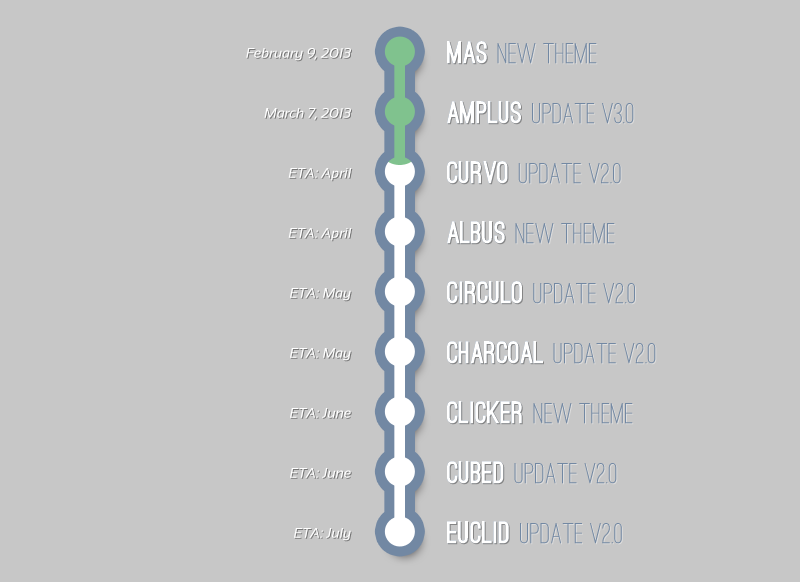
<style>
.page{position:relative;width:800px;height:582px;background:#c7c7c7}
.page>*{position:absolute;margin:0}
.t1{font:30px/60px "OstrichSans-Medium";color:#ffffff}
.t2{font:30px/60px "OstrichSans-Black";color:#ffffff}
.t3{font:14px/60px "SansationItalic";color:#ffffff}
</style>
<div class="page">
<p class="t1" style="left:447px;top:41px;width:209px;height:503px"><span class="t2">MAS </span>new theme<br><span class="t2">Amplus </span>Update v3.0<br><span class="t2">CURVO </span>update v2.0<br><span class="t2">ALBUS </span>new theme<br><span class="t2">CIRCULO </span>update v2.0<br><span class="t2">CHARCOAL </span>update v2.0<br><span class="t2">CLICKER </span>new theme<br><span class="t2">CUBED </span>update v2.0<br><span class="t2">EUCLID </span>update v2.0</p>
<p class="t2" style="left:447px;top:41px;width:96px;height:503px">MAS<br>Amplus<br>CURVO<br>ALBUS<br>CIRCULO<br>CHARCOAL<br>CLICKER<br>CUBED<br>EUCLID</p>
<p class="t3" style="left:246px;top:48px;width:106px;height:493px;text-align:right">February 9, 2013<br>March 7, 2013<br>ETA: April<br>ETA: April<br>ETA: May<br>ETA: May<br>ETA: June<br>ETA: June<br>ETA: July</p>
</div>
